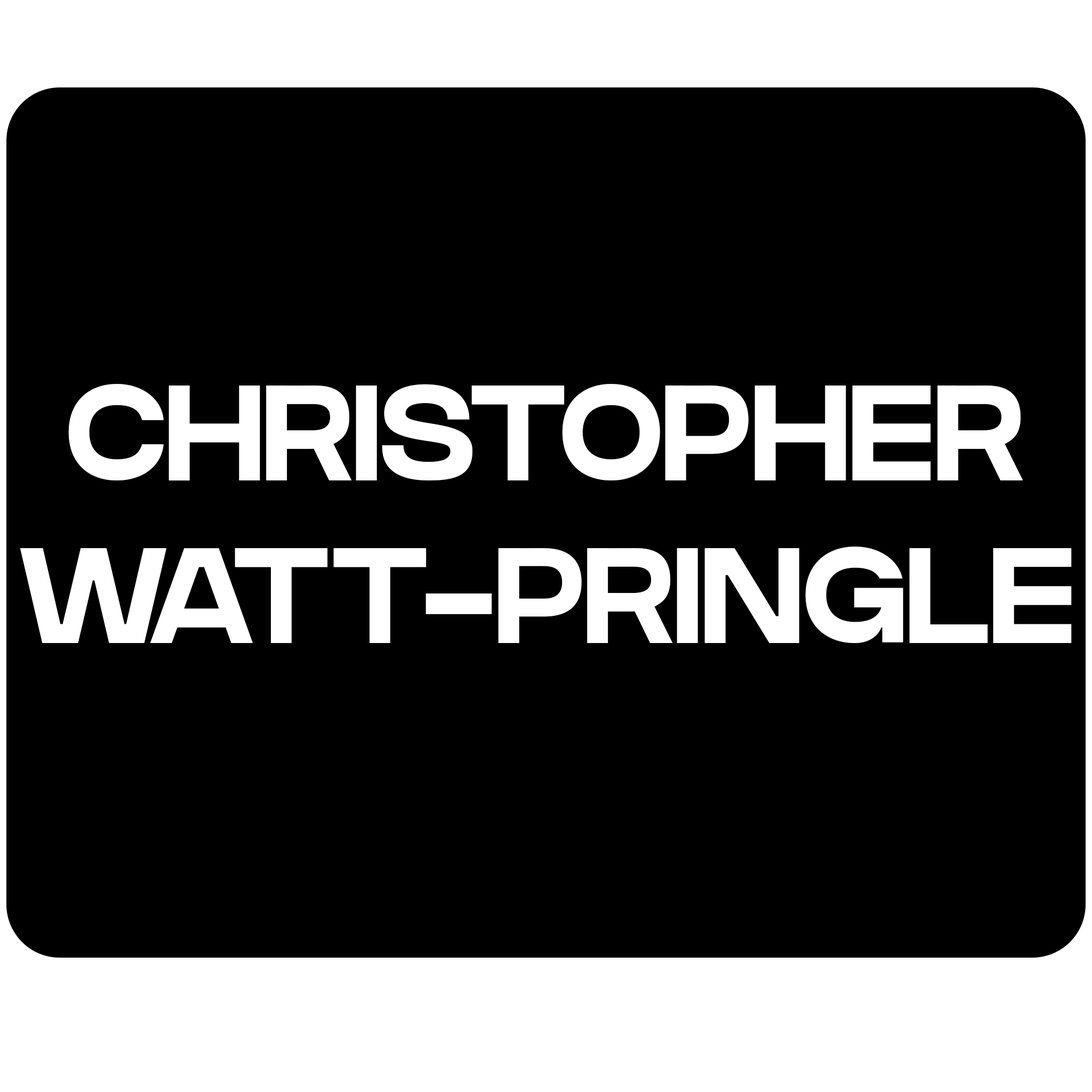
<style>
.page{position:relative;width:1092px;height:1092px;background:#000000}
.page>*{position:absolute;margin:0}
.t1{font:135.5px "GRIFTERBold";letter-spacing:-0.005em;color:#ffffff;text-transform:uppercase}
</style>
<div class="page">
<p class="t1" style="left:20px;top:384px;width:1052px;height:259px;text-align:center">CHRISTOPHER<br>WATT-PRINGLE</p>
</div>
